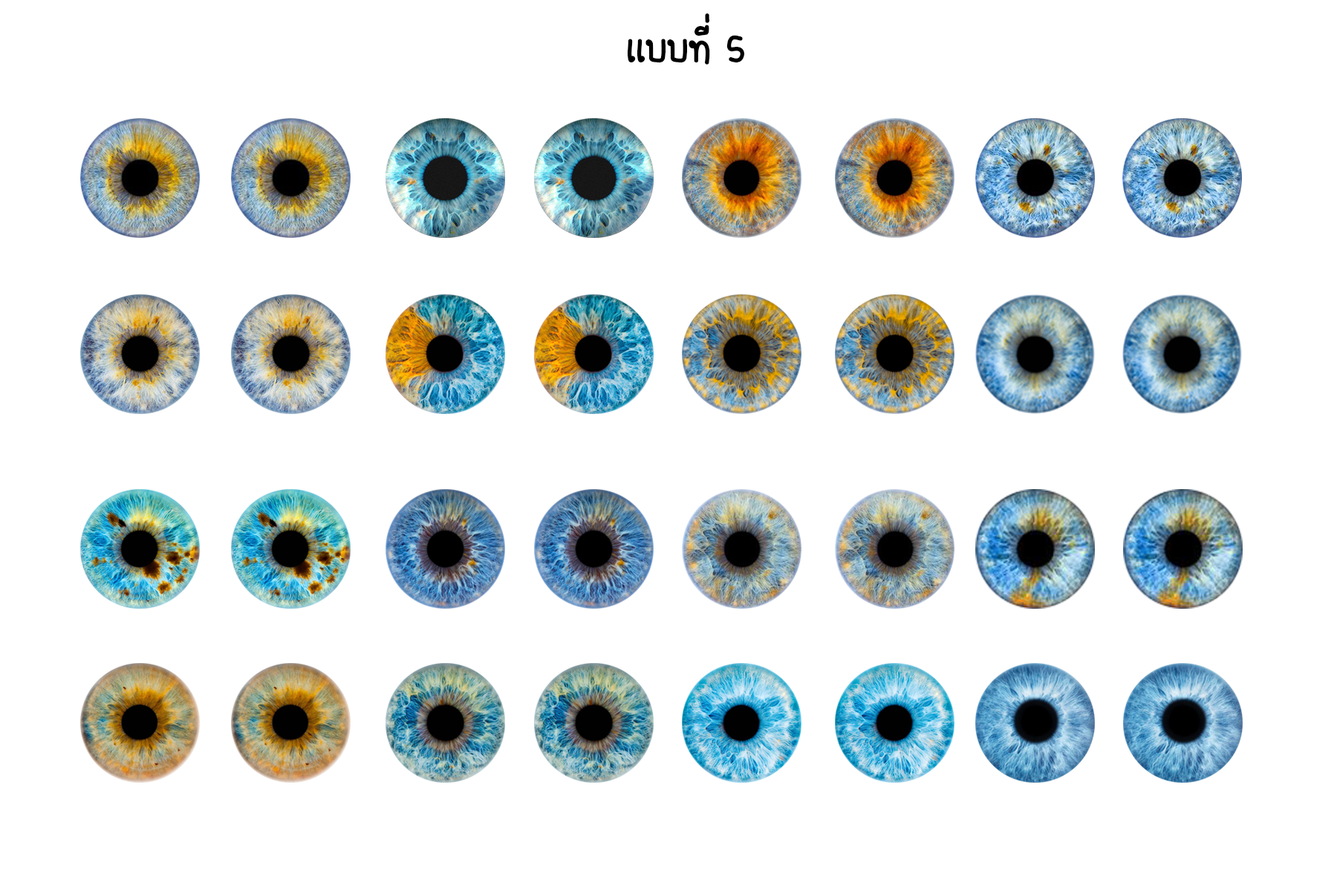
<style>
.page{position:relative;width:1337px;height:892px;background:#ffffff}
.page>*{position:absolute;margin:0}
.t1{font:55.7px "FCDaisyRegular";color:#000000}
</style>
<div class="page">
<p class="t1" style="left:627px;top:13px;width:117px;height:52px">เเบบที่ 5</p>
</div>
